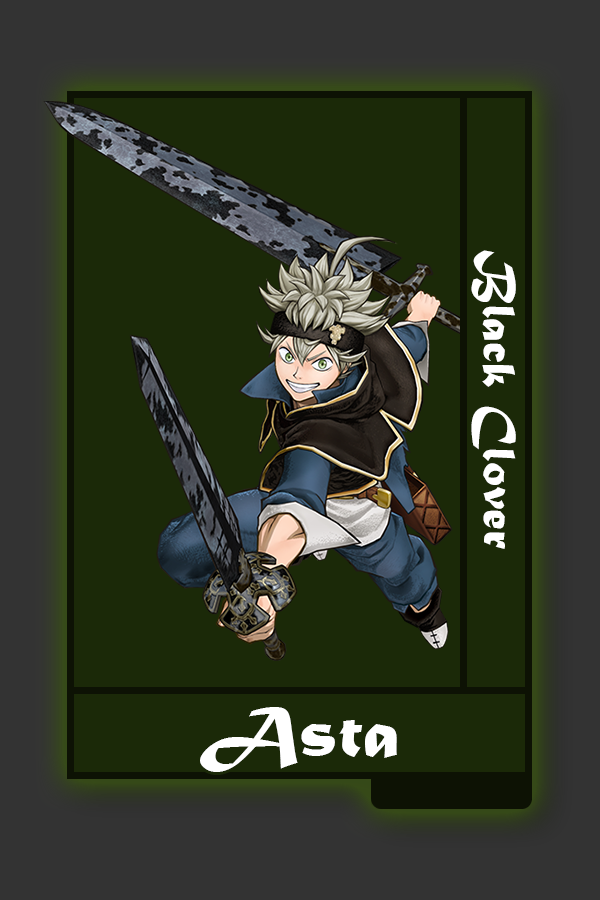
<style>
.page{position:relative;width:600px;height:900px;background:#1b2908}
.page>*{position:absolute;margin:0}
.t1{font:48.8px "MaturaMTScriptCapitals";color:#ffffff}
.t2{font:75px "MaturaMTScriptCapitals";color:#ffffff}
</style>
<div class="page">
<p class="t1" style="left:471px;top:250px;width:45px;height:299px;rotate:90deg">Black Clover</p>
<p class="t2" style="left:200px;top:707px;width:197px;height:65px">Asta</p>
</div>
